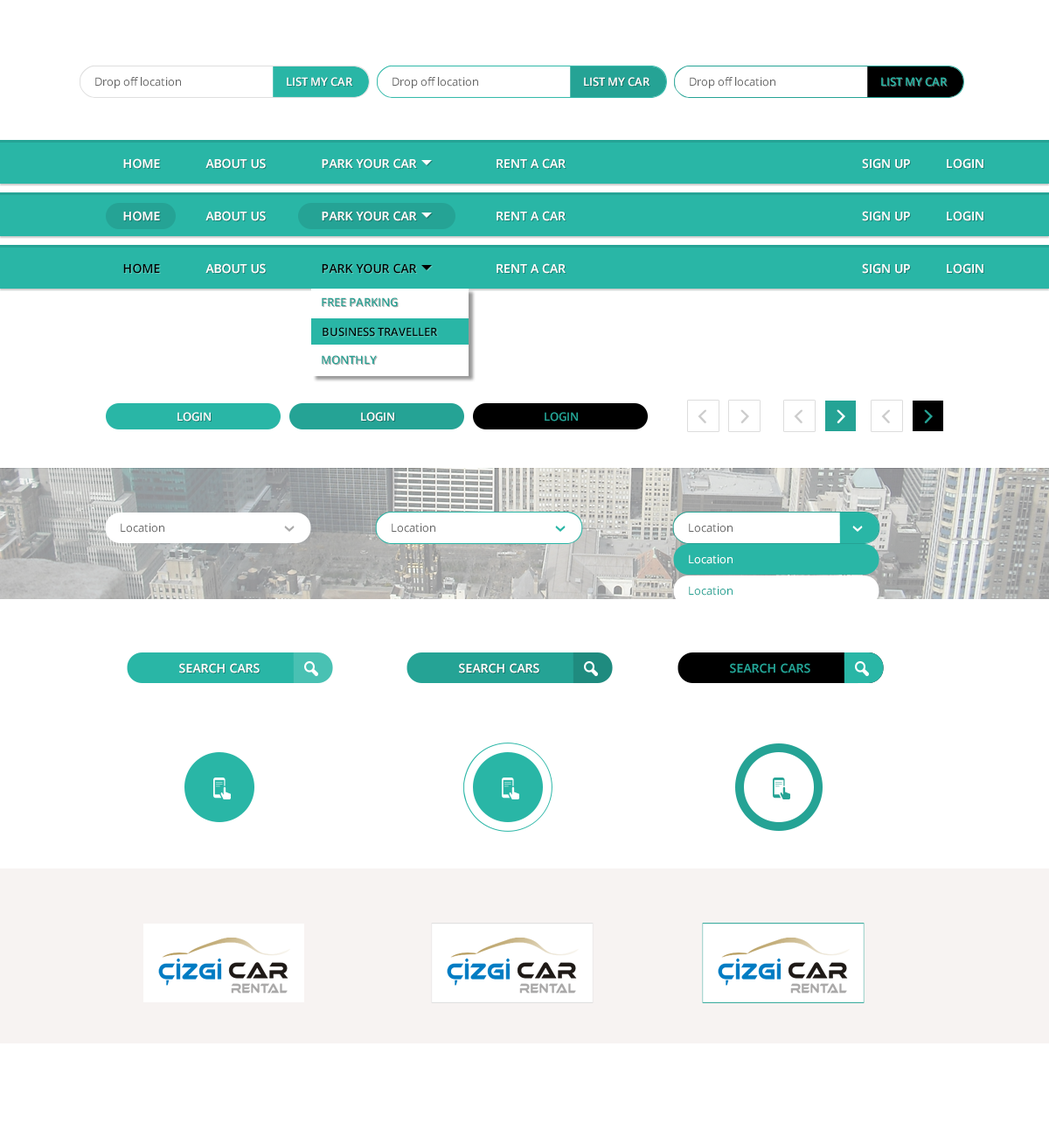
<style>
.page{position:relative;width:1049px;height:1137px;background:#ffffff}
.page>*{position:absolute;margin:0}
.t1{font:11.4px "OpenSans";color:#666666}
.t2{font:11.4px "OpenSans-Semibold";color:#ffffff}
.t3{font:11.4px "OpenSans-Semibold";color:#29b6a6}
.t4{font:12.2px "OpenSans-Semibold";color:#ffffff}
.t5{font:12.2px "OpenSans-Semibold";color:#000000}
.t6{font:11.4px "OpenSans-Semibold";color:#25a395}
.t7{font:11.4px "OpenSans-Semibold";color:#000000}
.t8{font:11.4px "OpenSans";color:#ffffff}
.t9{font:11.4px "OpenSans";color:#25a395}
.t10{font:12.2px "OpenSans-Semibold";color:#25a395}
</style>
<div class="page">
<p class="t1" style="left:95px;top:77px;width:86px;height:11px">Drop off location</p>
<p class="t2" style="left:287px;top:77px;width:65px;height:10px">LIST MY CAR</p>
<p class="t1" style="left:393px;top:77px;width:85px;height:11px">Drop off location</p>
<p class="t2" style="left:584px;top:77px;width:66px;height:10px">LIST MY CAR</p>
<p class="t1" style="left:690px;top:77px;width:85px;height:11px">Drop off location</p>
<p class="t3" style="left:881px;top:77px;width:66px;height:10px">LIST MY CAR</p>
<p class="t4" style="left:123px;top:158px;width:37px;height:11px">HOME</p>
<p class="t4" style="left:205px;top:158px;width:61px;height:11px">ABOUT US</p>
<p class="t4" style="left:322px;top:158px;width:95px;height:11px">PARK YOUR CAR</p>
<p class="t4" style="left:497px;top:158px;width:69px;height:11px">RENT A CAR</p>
<p class="t4" style="left:862px;top:158px;width:48px;height:11px">SIGN UP</p>
<p class="t4" style="left:947px;top:158px;width:37px;height:11px">LOGIN</p>
<p class="t4" style="left:123px;top:211px;width:37px;height:10px">HOME</p>
<p class="t4" style="left:205px;top:211px;width:61px;height:10px">ABOUT US</p>
<p class="t4" style="left:322px;top:211px;width:95px;height:10px">PARK YOUR CAR</p>
<p class="t4" style="left:497px;top:211px;width:69px;height:10px">RENT A CAR</p>
<p class="t4" style="left:862px;top:211px;width:48px;height:10px">SIGN UP</p>
<p class="t4" style="left:947px;top:211px;width:37px;height:10px">LOGIN</p>
<p class="t5" style="left:123px;top:263px;width:37px;height:11px">HOME</p>
<p class="t4" style="left:205px;top:263px;width:61px;height:11px">ABOUT US</p>
<p class="t5" style="left:322px;top:263px;width:95px;height:11px">PARK YOUR CAR</p>
<p class="t4" style="left:497px;top:263px;width:69px;height:11px">RENT A CAR</p>
<p class="t4" style="left:862px;top:263px;width:48px;height:11px">SIGN UP</p>
<p class="t4" style="left:947px;top:263px;width:37px;height:11px">LOGIN</p>
<p class="t6" style="left:322px;top:297px;width:76px;height:10px">FREE PARKING</p>
<p class="t7" style="left:323px;top:327px;width:114px;height:10px">BUSINESS TRAVELLER</p>
<p class="t6" style="left:322px;top:355px;width:55px;height:10px">MONTHLY</p>
<p class="t2" style="left:177px;top:412px;width:34px;height:9px">LOGIN</p>
<p class="t2" style="left:361px;top:412px;width:33px;height:9px">LOGIN</p>
<p class="t6" style="left:545px;top:412px;width:33px;height:9px">LOGIN</p>
<p class="t1" style="left:121px;top:523px;width:43px;height:9px">Location</p>
<p class="t1" style="left:392px;top:523px;width:43px;height:9px">Location</p>
<p class="t1" style="left:689px;top:523px;width:44px;height:9px">Location</p>
<p class="t8" style="left:689px;top:554px;width:44px;height:10px">Location</p>
<p class="t9" style="left:689px;top:586px;width:44px;height:9px">Location</p>
<p class="t4" style="left:179px;top:663px;width:81px;height:10px">SEARCH CARS</p>
<p class="t4" style="left:459px;top:663px;width:80px;height:10px">SEARCH CARS</p>
<p class="t10" style="left:730px;top:663px;width:80px;height:10px">SEARCH CARS</p>
</div>
